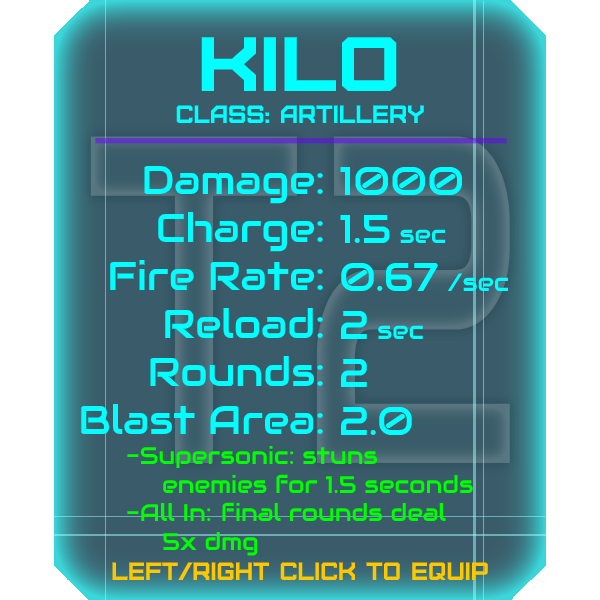
<style>
.page{position:relative;width:600px;height:600px;background:#3a5c6a}
.page>*{position:absolute;margin:0}
.t1{font:76.8px "Furore";color:#00ffff;scale:1.13 1}
.t2{font:25px "Furore";color:#00ffff}
.t3{font:40px "Audiowide-Regular";color:#00ffff}
.t4{font:25px "Audiowide-Regular";color:#00ffff}
.t5{font:24px "Audiowide-Regular";color:#00ff00}
.t6{font:25px "Furore";color:#ffc700}
</style>
<div class="page">
<p class="t1" style="left:201px;top:37px;width:196px;height:54px">KILO</p>
<p class="t2" style="left:176px;top:105px;width:248px;height:18px">Class: artillery</p>
<p class="t3" style="left:81px;top:165px;width:242px;height:269px;text-align:right">Damage:<br>Charge:<br>Fire Rate:<br>Reload:<br>Rounds:<br>Blast Area:</p>
<p class="t3" style="left:340px;top:166px;width:169px;height:269px">1000<br>1.5 <span class="t4">sec<br></span>0.67 <span class="t4">/sec<br></span>2 <span class="t4">sec<br></span>2<br>2.0</p>
<p class="t5" style="left:127px;top:445px;width:346px;height:111px">-Supersonic: stuns<br> enemies for 1.5 seconds<br>-All In:   inal rounds deal<br> 5x dmg</p>
<p class="t5" style="left:222px;top:502px;width:12px;height:19px">f</p>
<p class="t6" style="left:112px;top:562px;width:376px;height:18px">left/right click to equip</p>
</div>
